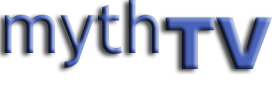
<style>
.page{position:relative;width:272px;height:91px;background:#ffffff}
.page>*{position:absolute;margin:0}
.t1{font:72px "TrebuchetMS"}
.t2{font:72px "Arial-Black"}
</style>
<div class="page">
<p class="t1" style="left:4px;top:0px;width:155px;height:68px">myth</p>
<p class="t2" style="left:165px;top:17px;width:107px;height:52px">TV</p>
</div>
